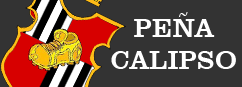
<style>
.page{position:relative;width:242px;height:87px;background:#333333}
.page>*{position:absolute;margin:0}
.t1{font:27px "ClarendonBT-Roman";color:#ffffff}
</style>
<div class="page">
<p class="t1" style="left:111px;top:12px;width:125px;height:57px;text-align:center">PEÑA<br>CALIPSO</p>
</div>
